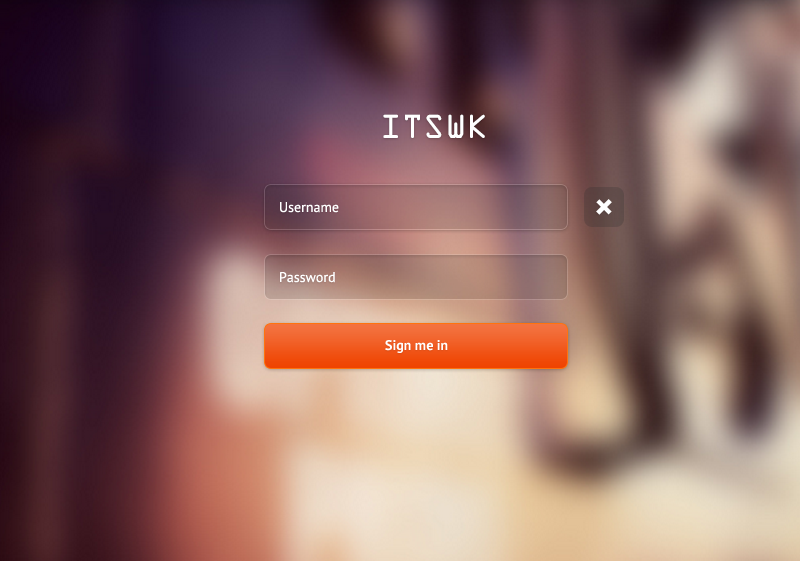
<style>
.page{position:relative;width:800px;height:561px}
.page>*{position:absolute;margin:0}
.t1{font:30px "OCRAStd";color:#ffffff}
.t2{font:14px "PTSans-Regular";color:#ffffff}
.t3{font:40px "PTSans-Bold";color:#ffffff}
.t4{font:14px "PTSans-Bold";color:#ffffff}
</style>
<div class="page">
<p class="t1" style="left:383px;top:114px;width:102px;height:24px">ITSWK</p>
<p class="t2" style="left:280px;top:202px;width:59px;height:11px">Username</p>
<p class="t3" style="left:596px;top:199px;width:16px;height:16px;rotate:45deg">+</p>
<p class="t2" style="left:280px;top:272px;width:55px;height:11px">Password</p>
<p class="t4" style="left:385px;top:340px;width:63px;height:13px">Sign me in</p>
</div>
